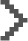
<style>
.page{position:relative;width:28px;height:41px;background:#ffffff}
.page>*{position:absolute;margin:0}
.t1{font:72px "Fixedsys";color:#535353}
</style>
<div class="page">
<p class="t1" style="left:0px;top:0px;width:28px;height:41px">&gt;</p>
</div>
